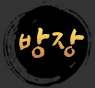
<style>
.page{position:relative;width:95px;height:88px;background:#000000}
.page>*{position:absolute;margin:0}
.t1{font:35.3px "SangSangRockOTF";letter-spacing:0.04em}
</style>
<div class="page">
<p class="t1" style="left:19px;top:27px;width:66px;height:31px">방장</p>
</div>
